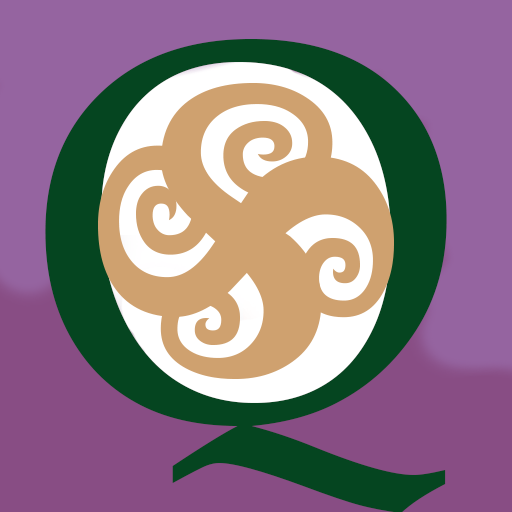
<style>
.page{position:relative;width:512px;height:512px;background:#9564a0}
.page>*{position:absolute;margin:0}
.t1{font:541.7px "BookAntiqua";color:#054520}
</style>
<div class="page">
<p class="t1" style="left:45px;top:39px;width:402px;height:474px">Q</p>
</div>
